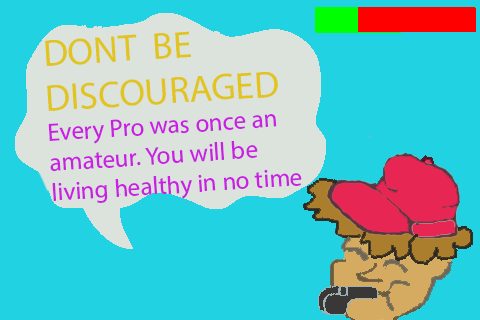
<style>
.page{position:relative;width:480px;height:320px;background:#21d2e2}
.page>*{position:absolute;margin:0}
.t1{font:25px "MyriadHebrew-Regular";color:#c921e2}
.t2{font:37.5px "MyriadHebrew-Regular";color:#e2c421}
</style>
<div class="page">
<p class="t1" style="left:45px;top:31px;width:257px;height:172px;text-align:right;rotate:-4deg"><span class="t2">DONT  BE        DISCOURAGED<br></span>Every Pro was once an amateur. You will be living healthy in no time</p>
</div>
